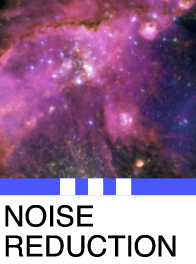
<style>
.page{position:relative;width:196px;height:264px;background:#ffffff}
.page>*{position:absolute;margin:0}
.t1{font:28.9px/30px "Helvetica";color:#000000}
</style>
<div class="page">
<p class="t1" style="left:5px;top:205px;width:171px;height:52px">NOISE<br>REDUCTION</p>
</div>
